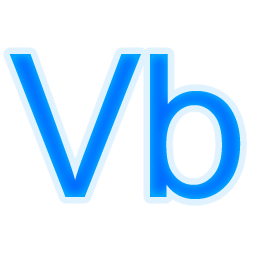
<style>
.page{position:relative;width:256px;height:256px;background:#ffffff}
.page>*{position:absolute;margin:0}
.t1{font:200px "ArialMT";letter-spacing:-0.01em;color:#0084fe}
</style>
<div class="page">
<p class="t1" style="left:9px;top:54px;width:232px;height:145px">Vb</p>
</div>
